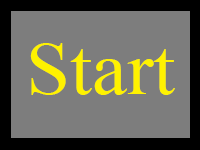
<style>
.page{position:relative;width:200px;height:150px;background:#7d7d7d}
.page>*{position:absolute;margin:0}
.t1{font:74.9px "TimesNewRomanPSMT";color:#fff200;scale:1.05 1}
</style>
<div class="page">
<p class="t1" style="left:30px;top:43px;width:145px;height:52px">Start</p>
</div>
